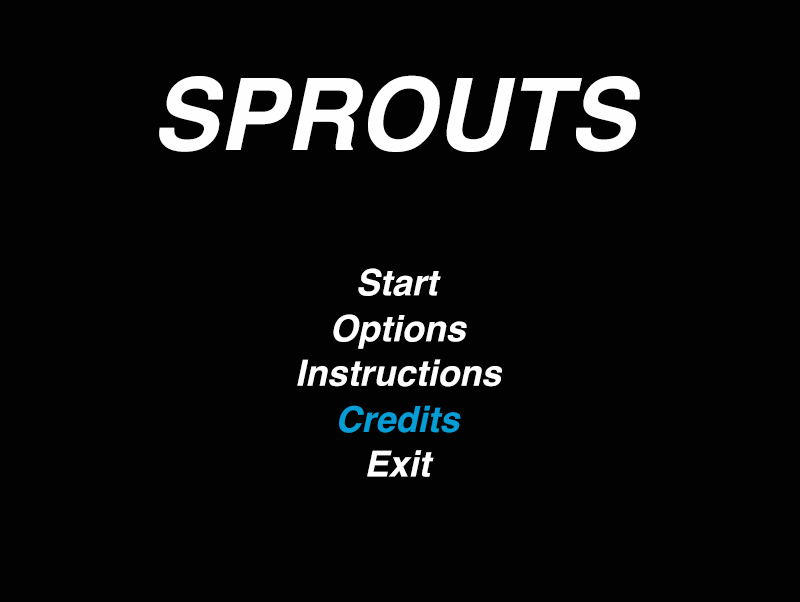
<style>
.page{position:relative;width:800px;height:602px;background:#020203}
.page>*{position:absolute;margin:0}
.t1{font:100px "Helvetica-BoldOblique";color:#fefefe}
.t2{font:36px "Helvetica-BoldOblique";color:#fefefe}
.t3{font:36px "Helvetica-BoldOblique";color:#069dd5}
</style>
<div class="page">
<p class="t1" style="left:159px;top:75px;width:481px;height:77px">SPROUTS</p>
<p class="t2" style="left:358px;top:268px;width:83px;height:28px">Start</p>
<p class="t2" style="left:333px;top:314px;width:134px;height:35px">Options</p>
<p class="t2" style="left:297px;top:359px;width:205px;height:28px">Instructions</p>
<p class="t3" style="left:339px;top:405px;width:122px;height:28px">Credits</p>
<p class="t2" style="left:367px;top:450px;width:67px;height:27px">Exit</p>
</div>
